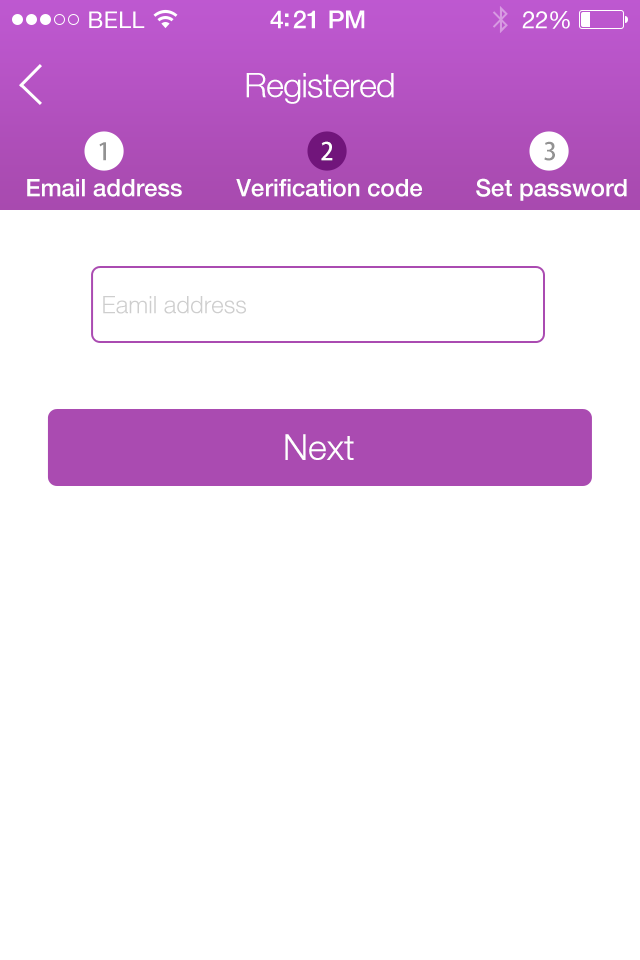
<style>
.page{position:relative;width:640px;height:960px;background:#ffffff}
.page>*{position:absolute;margin:0}
.t1{font:34px "HelveticaNeueLT-Light";letter-spacing:-0.02em;color:#ffffff}
.t2{font:24px "AdobeHeitiStd-Regular";color:#929292}
.t3{font:24px "AdobeHeitiStd-Regular";color:#ffffff}
.t4{font:24px "HelveticaNeueLT-Medium";color:#ffffff}
.t5{font:24px "HelveticaNeueLT-Light";color:#cecece}
.t6{font:36px "HelveticaNeueLT-Light";color:#ffffff}
</style>
<div class="page">
<p class="t1" style="left:246px;top:73px;width:148px;height:31px">Registered</p>
<p class="t2" style="left:99px;top:142px;width:7px;height:19px">1</p>
<p class="t3" style="left:321px;top:141px;width:12px;height:20px">2</p>
<p class="t2" style="left:544px;top:141px;width:11px;height:20px">3</p>
<p class="t4" style="left:27px;top:179px;width:155px;height:18px">Email address</p>
<p class="t4" style="left:236px;top:179px;width:186px;height:18px">Verification code</p>
<p class="t4" style="left:476px;top:178px;width:151px;height:23px">Set password</p>
<p class="t5" style="left:103px;top:296px;width:143px;height:18px">Eamil address</p>
<p class="t6" style="left:285px;top:434px;width:69px;height:26px">Next</p>
</div>
